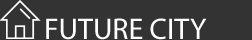
<style>
.page{position:relative;width:252px;height:40px;background:#333333}
.page>*{position:absolute;margin:0}
.t1{font:30px "MyriadPro-Regular";color:#ffffff}
</style>
<div class="page">
<p class="t1" style="left:46px;top:18px;width:161px;height:22px">FUTURE CITY</p>
</div>
